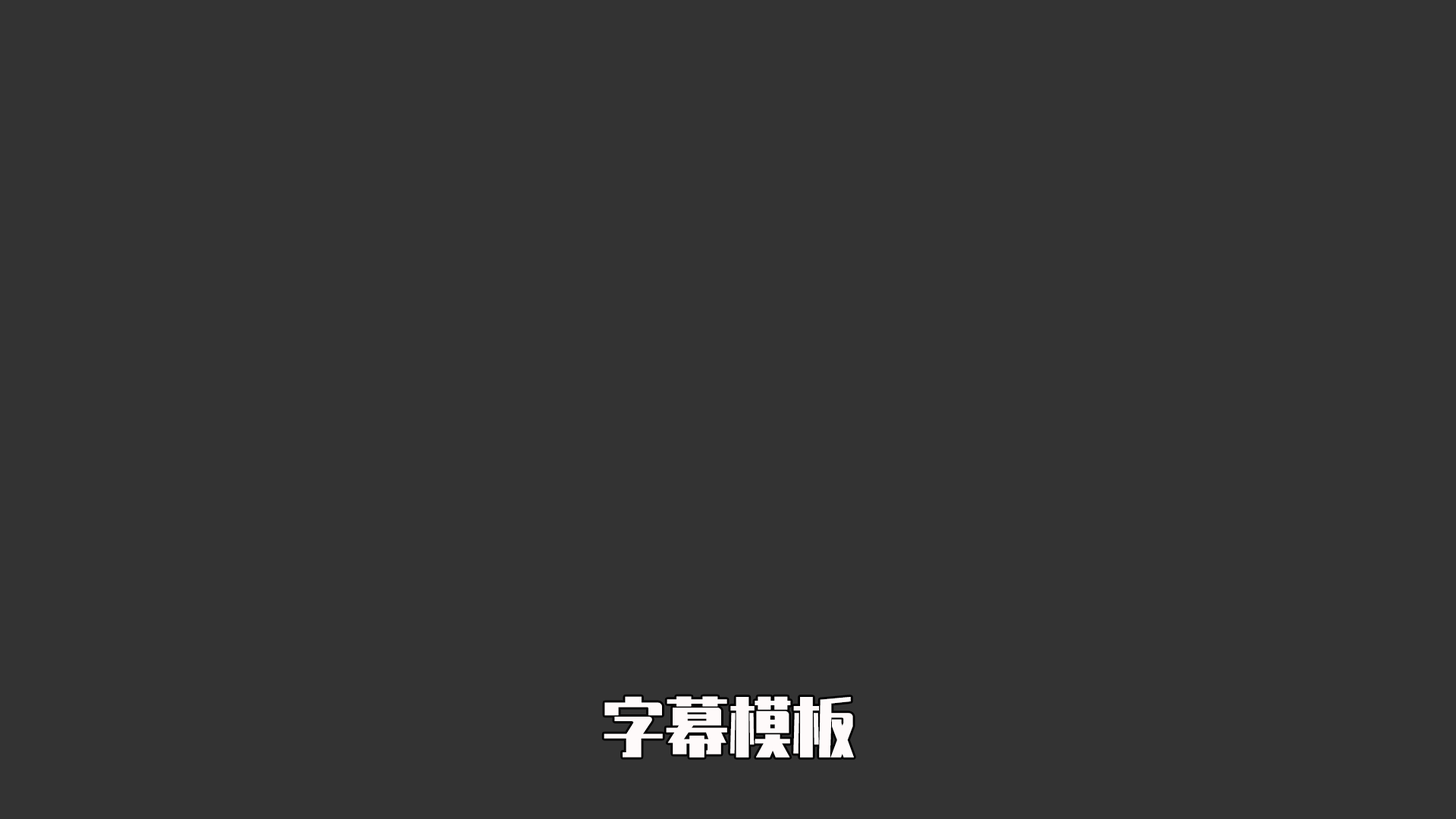
<style>
.page{position:relative;width:1456px;height:819px;background:#333333}
.page>*{position:absolute;margin:0}
.t1{font:63.2px "ZhenyanGB-Regular";color:#fefafa}
</style>
<div class="page">
<p class="t1" style="left:604px;top:696px;width:250px;height:62px">字幕模板</p>
</div>
